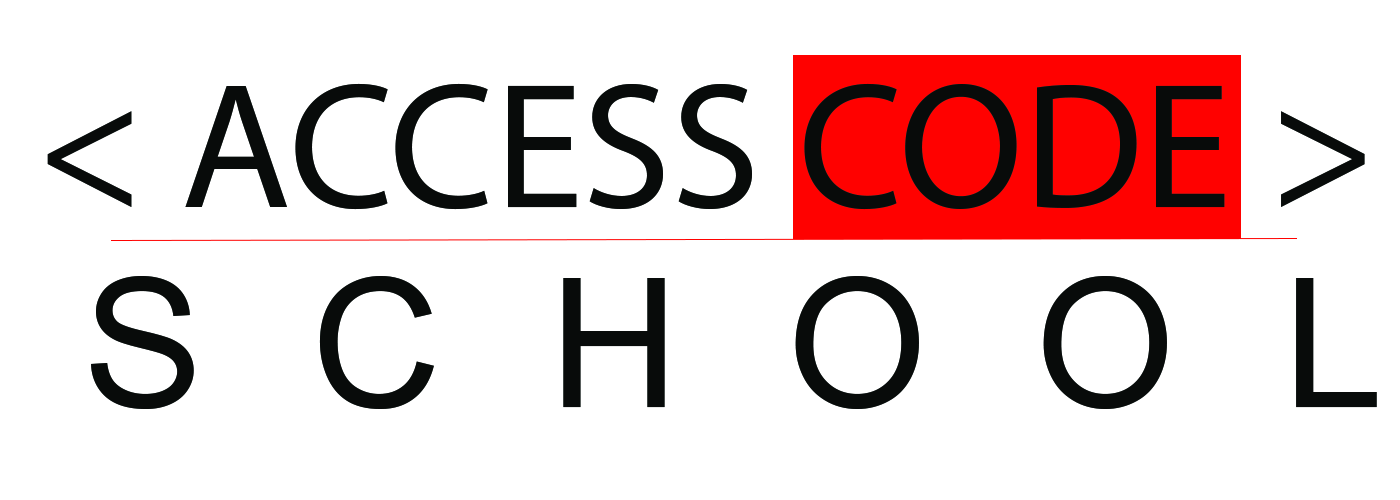
<style>
.page{position:relative;width:1400px;height:500px;background:#ffffff}
.page>*{position:absolute;margin:0}
.t1{font:180px "MyriadPro-Regular";color:#080b0a}
.t2{font:180px "ArialMT";letter-spacing:0.6em;color:#080b0a}
</style>
<div class="page">
<p class="t1" style="left:47px;top:83px;width:1318px;height:127px">&lt; ACCESS CODE &gt;</p>
<p class="t2" style="left:91px;top:276px;width:1286px;height:133px">SCHOOL</p>
</div>
